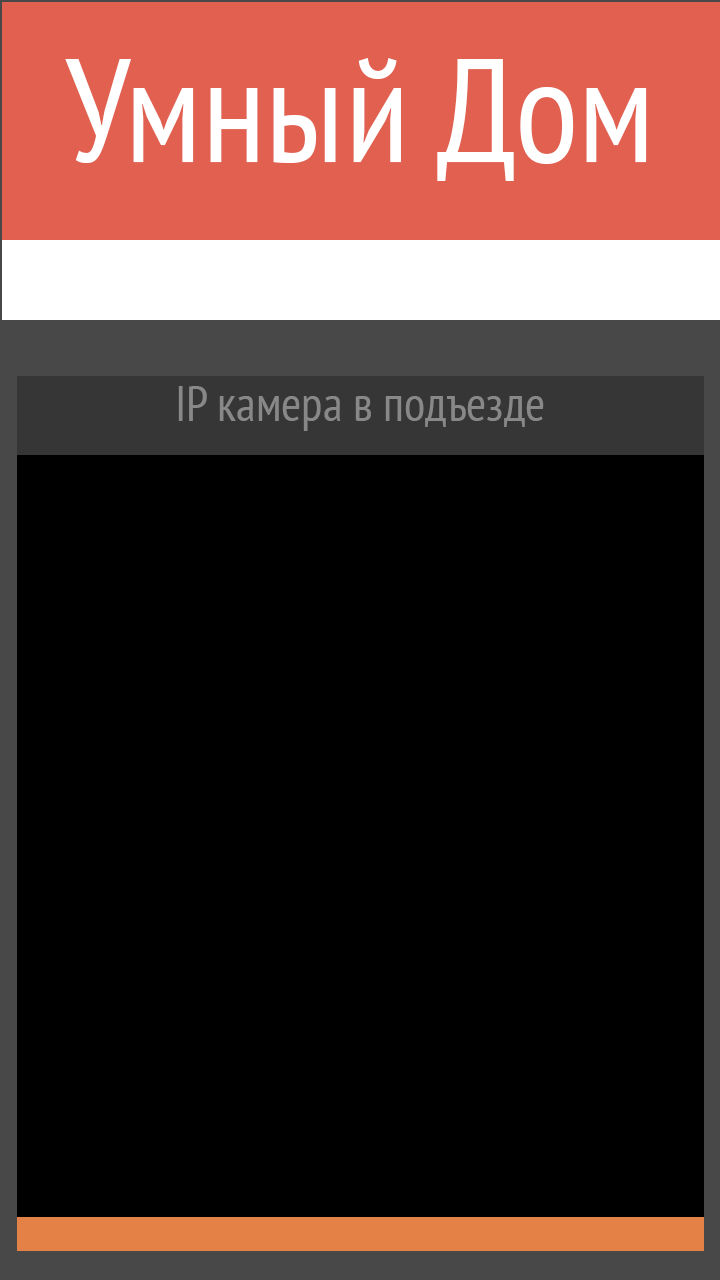
<style>
.page{position:relative;width:720px;height:1280px;background:#000000}
.page>*{position:absolute;margin:0}
.t1{font:147px "PTSans-Narrow";color:#ffffff}
.t2{font:49px "PTSans-Narrow";color:#888888}
</style>
<div class="page">
<p class="t1" style="left:65px;top:58px;width:582px;height:123px">Умный Дом</p>
<p class="t2" style="left:178px;top:386px;width:366px;height:45px">IP камера в подъезде</p>
</div>
